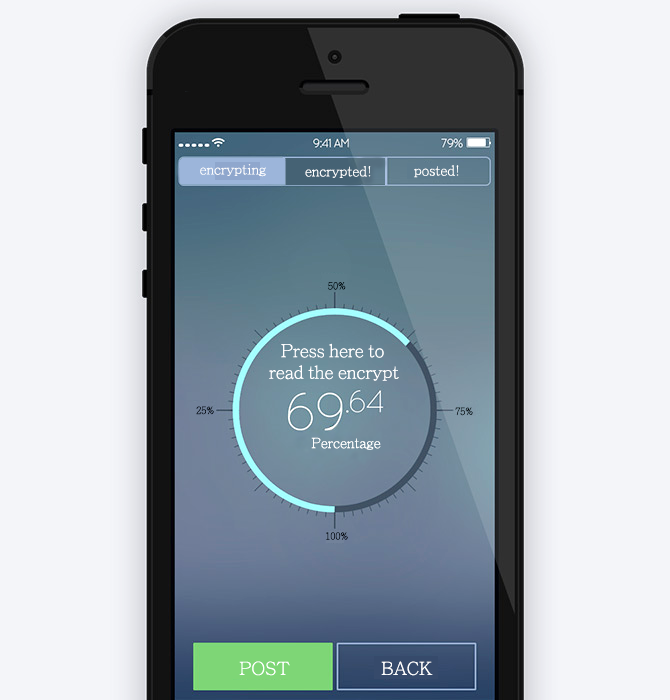
<style>
.page{position:relative;width:670px;height:700px;background:#f4f5f9}
.page>*{position:absolute;margin:0}
.t1{font:14px "AdobeMingStd-Light";color:#ffffff}
.t2{font:10px "AdobeMingStd-Light"}
.t3{font:18px "AdobeMingStd-Light";color:#fefeff}
.t4{font:10px "AdobeMingStd-Light";color:#000005}
.t5{font:10px "AdobeMingStd-Light";color:#000000}
</style>
<div class="page">
<p class="t1" style="left:200px;top:164px;width:66px;height:13px">encrypting</p>
<p class="t1" style="left:305px;top:166px;width:66px;height:12px">encrypted!</p>
<p class="t1" style="left:414px;top:165px;width:45px;height:13px">posted!</p>
<p class="t2" style="left:328px;top:282px;width:18px;height:8px">50%</p>
<p class="t3" style="left:281px;top:343px;width:103px;height:15px">Press here to</p>
<p class="t3" style="left:269px;top:365px;width:130px;height:16px">read the encrypt</p>
<p class="t4" style="left:196px;top:406px;width:18px;height:9px">25%</p>
<p class="t5" style="left:455px;top:407px;width:18px;height:9px">75%</p>
<p class="t1" style="left:311px;top:437px;width:70px;height:13px">Percentage</p>
<p class="t5" style="left:326px;top:532px;width:22px;height:8px">100%</p>
<p class="t3" style="left:239px;top:661px;width:51px;height:15px">POST</p>
<p class="t3" style="left:381px;top:661px;width:52px;height:15px">BACK</p>
</div>
